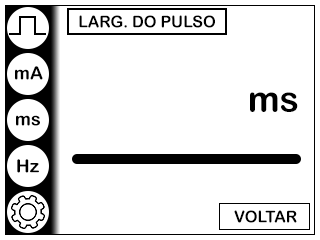
<style>
.page{position:relative;width:320px;height:240px;background:#ffffff}
.page>*{position:absolute;margin:0}
.t1{font:16px "ArialRoundedMTBold";color:#000000}
.t2{font:18px "ArialRoundedMTBold";color:#000000}
.t3{font:36px "ArialRoundedMTBold";color:#000000}
</style>
<div class="page">
<p class="t1" style="left:79px;top:15px;width:136px;height:13px">LARG. DO PULSO</p>
<p class="t2" style="left:15px;top:66px;width:28px;height:14px">mA</p>
<p class="t3" style="left:250px;top:92px;width:48px;height:20px">ms</p>
<p class="t2" style="left:16px;top:115px;width:24px;height:11px">ms</p>
<p class="t2" style="left:17px;top:159px;width:22px;height:14px">Hz</p>
<p class="t1" style="left:234px;top:210px;width:63px;height:13px">VOLTAR</p>
</div>
